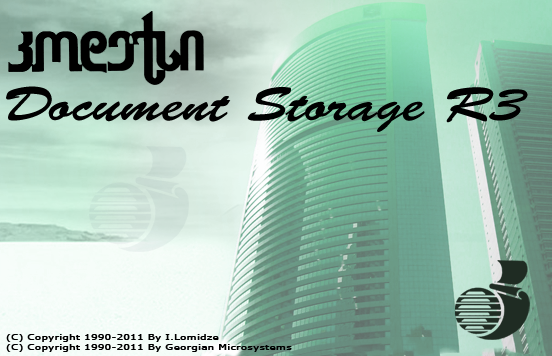
<style>
.page{position:relative;width:552px;height:356px}
.page>*{position:absolute;margin:0}
.t1{font:48px "BrushScriptStd";letter-spacing:0.005em;color:#000000;scale:1.2 1}
.t2{font:8px "MSReferenceSansSerif";letter-spacing:0.005em;color:#000000;font-weight:bold;scale:1.28 1}
</style>
<div class="page">
<p class="t1" style="left:6px;top:86px;width:522px;height:46px">Document Storage R3</p>
<p class="t2" style="left:6px;top:334px;width:286px;height:18px">(C) Copyright 1990-2011 By I.Lomidze<br>(C) Copyright 1990-2011 By Georgian Microsystems</p>
</div>
